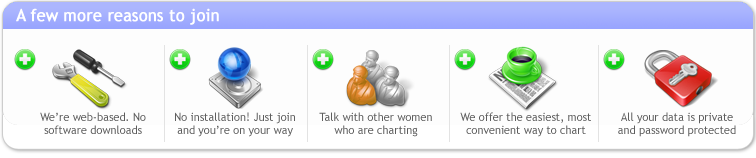
<style>
.page{position:relative;width:756px;height:158px;background:#fdfdfd}
.page>*{position:absolute;margin:0}
.t1{font:16.8px "TrebuchetMS";color:#ffffff;font-weight:bold;scale:0.95 1}
.t2{font:11.6px "TrebuchetMS";color:#5e5e5e;scale:0.95 1}
</style>
<div class="page">
<p class="t1" style="left:16px;top:8px;width:203px;height:17px">A few more reasons to join</p>
<p class="t2" style="left:40px;top:112px;width:106px;height:22px;text-align:center">We’re web-based. No<br>software downloads</p>
<p class="t2" style="left:175px;top:112px;width:120px;height:25px;text-align:center">No installation! Just join<br>and you’re on your way</p>
<p class="t2" style="left:319px;top:112px;width:113px;height:25px;text-align:center">Talk with other women<br>who are charting</p>
<p class="t2" style="left:460px;top:112px;width:131px;height:25px;text-align:center">We offer the easiest, most<br>convenient way to chart</p>
<p class="t2" style="left:618px;top:112px;width:118px;height:25px;text-align:center">All your data is private<br>and password protected</p>
</div>
